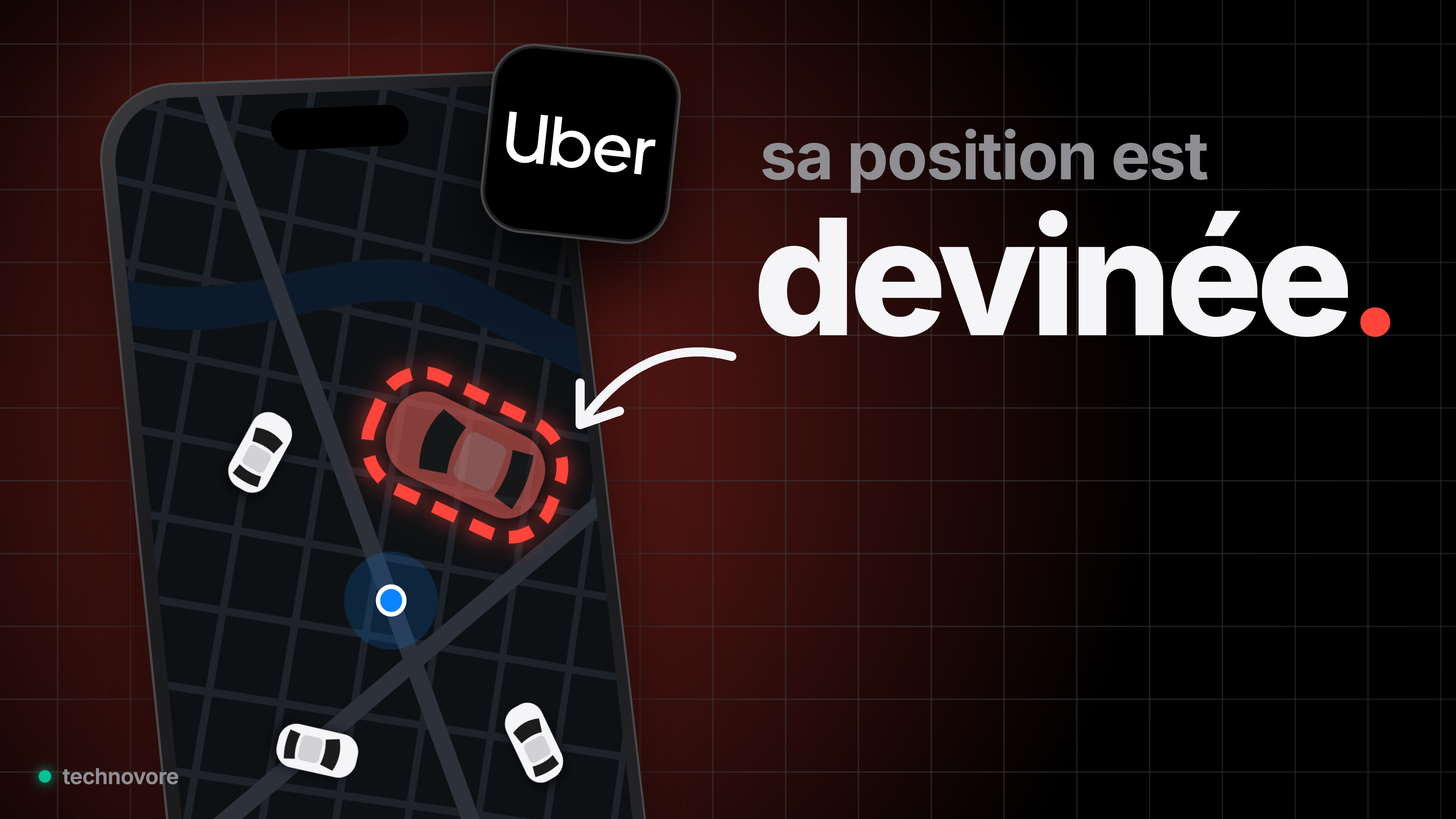
<style>
.page{position:relative;width:1456px;height:819px;background:#000000}
.page>*{position:absolute;margin:0}
.t1{font:66px "Inter-Bold";letter-spacing:-0.02em;color:#8e8e93}
.t2{font:161.5px "Inter-ExtraBold";letter-spacing:-0.04em;color:#f5f5f7}
.t3{font:161.5px "Inter-ExtraBold";letter-spacing:-0.04em;color:#ff453a}
</style>
<div class="page">
<p class="t1" style="left:762px;top:129px;width:446px;height:64px">sa position est</p>
<p class="t2" style="left:758px;top:210px;width:633px;height:127px">devinée<span class="t3">.</span></p>
</div>
